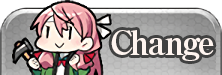
<style>
.page{position:relative;width:222px;height:75px}
.page>*{position:absolute;margin:0}
.t1{font:34px "RyuminPro-ExBold";letter-spacing:-0.08em;color:#fff5f0}
</style>
<div class="page">
<p class="t1" style="left:111px;top:30px;width:103px;height:31px">Change</p>
</div>
